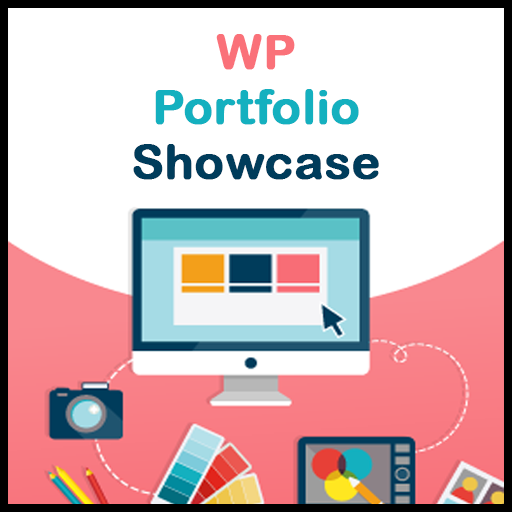
<style>
.page{position:relative;width:512px;height:512px;background:#ffffff}
.page>*{position:absolute;margin:0}
.t1{font:48px/55px "ArialRoundedMTBold";color:#14b0bf;font-weight:bold}
.t2{font:48px/55px "ArialRoundedMTBold";color:#fa7179;font-weight:bold}
.t3{font:48px/55px "ArialRoundedMTBold";color:#003c5b;font-weight:bold}
</style>
<div class="page">
<p class="t1" style="left:133px;top:34px;width:246px;height:146px;text-align:center"><span class="t2">WP<br></span>Portfolio<br><span class="t3">Showcase</span></p>
</div>
